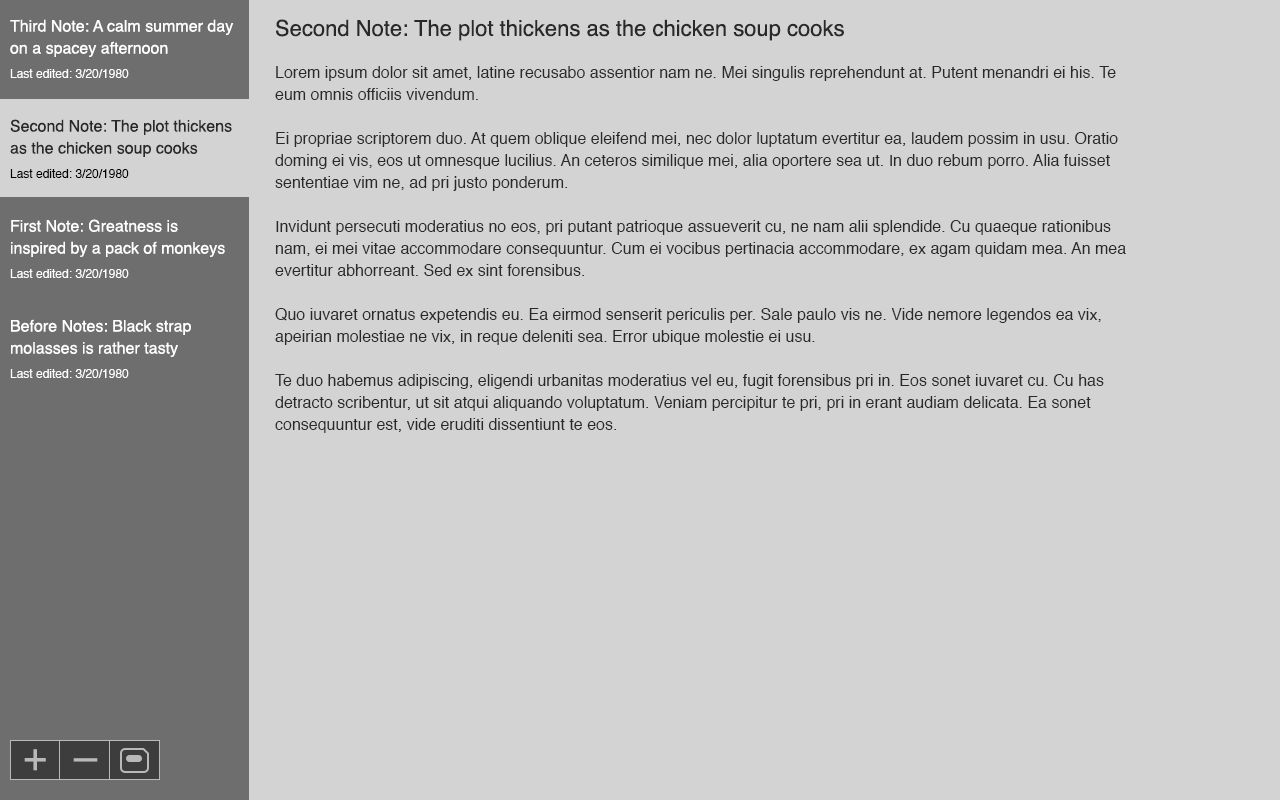
<style>
.page{position:relative;width:1280px;height:800px;background:#d3d3d3}
.page>*{position:absolute;margin:0}
.t1{font:16px/22px "Helvetica";color:#ffffff}
.t2{font:22px "Helvetica";color:#292929}
.t3{font:12px "Helvetica";color:#fefefe}
.t4{font:16px/22px "Helvetica";color:#292929}
.t5{font:12px "Helvetica";color:#000000}
.t6{font:12px "Helvetica";color:#ffffff}
.t7{font:41px "Helvetica";color:#b9b9b9}
</style>
<div class="page">
<p class="t1" style="left:10px;top:19px;width:224px;height:38px">Third Note: A calm summer day on a spacey afternoon</p>
<p class="t2" style="left:276px;top:19px;width:568px;height:22px">Second Note: The plot thickens as the chicken soup cooks</p>
<p class="t3" style="left:10px;top:69px;width:119px;height:9px">Last edited: 3/20/1980</p>
<p class="t4" style="left:275px;top:66px;width:851px;height:367px">Lorem ipsum dolor sit amet, latine recusabo assentior nam ne. Mei singulis reprehendunt at. Putent menandri ei his. Te eum omnis officiis vivendum.<br><br>Ei propriae scriptorem duo. At quem oblique eleifend mei, nec dolor luptatum evertitur ea, laudem possim in usu. Oratio doming ei vis, eos ut omnesque lucilius. An ceteros similique mei, alia oportere sea ut. In duo rebum porro. Alia fuisset sententiae vim ne, ad pri justo ponderum.<br><br>Invidunt persecuti moderatius no eos, pri putant patrioque assueverit cu, ne nam alii splendide. Cu quaeque rationibus nam, ei mei vitae accommodare consequuntur. Cum ei vocibus pertinacia accommodare, ex agam quidam mea. An mea evertitur abhorreant. Sed ex sint forensibus.<br><br>Quo iuvaret ornatus expetendis eu. Ea eirmod senserit periculis per. Sale paulo vis ne. Vide nemore legendos ea vix, apeirian molestiae ne vix, in reque deleniti sea. Error ubique molestie ei usu.<br><br>Te duo habemus adipiscing, eligendi urbanitas moderatius vel eu, fugit forensibus pri in. Eos sonet iuvaret cu. Cu has detracto scribentur, ut sit atqui aliquando voluptatum. Veniam percipitur te pri, pri in erant audiam delicata. Ea sonet consequuntur est, vide eruditi dissentiunt te eos.</p>
<p class="t4" style="left:10px;top:119px;width:222px;height:38px">Second Note: The plot thickens as the chicken soup cooks</p>
<p class="t5" style="left:10px;top:169px;width:119px;height:9px">Last edited: 3/20/1980</p>
<p class="t1" style="left:11px;top:219px;width:214px;height:38px">First Note: Greatness is inspired by a pack of monkeys</p>
<p class="t6" style="left:10px;top:269px;width:119px;height:9px">Last edited: 3/20/1980</p>
<p class="t1" style="left:11px;top:319px;width:180px;height:38px">Before Notes: Black strap molasses is rather tasty</p>
<p class="t6" style="left:10px;top:369px;width:119px;height:9px">Last edited: 3/20/1980</p>
<p class="t7" style="left:24px;top:749px;width:22px;height:22px">+</p>
<p class="t7" style="left:73px;top:758px;width:25px;height:4px">–</p>
</div>
